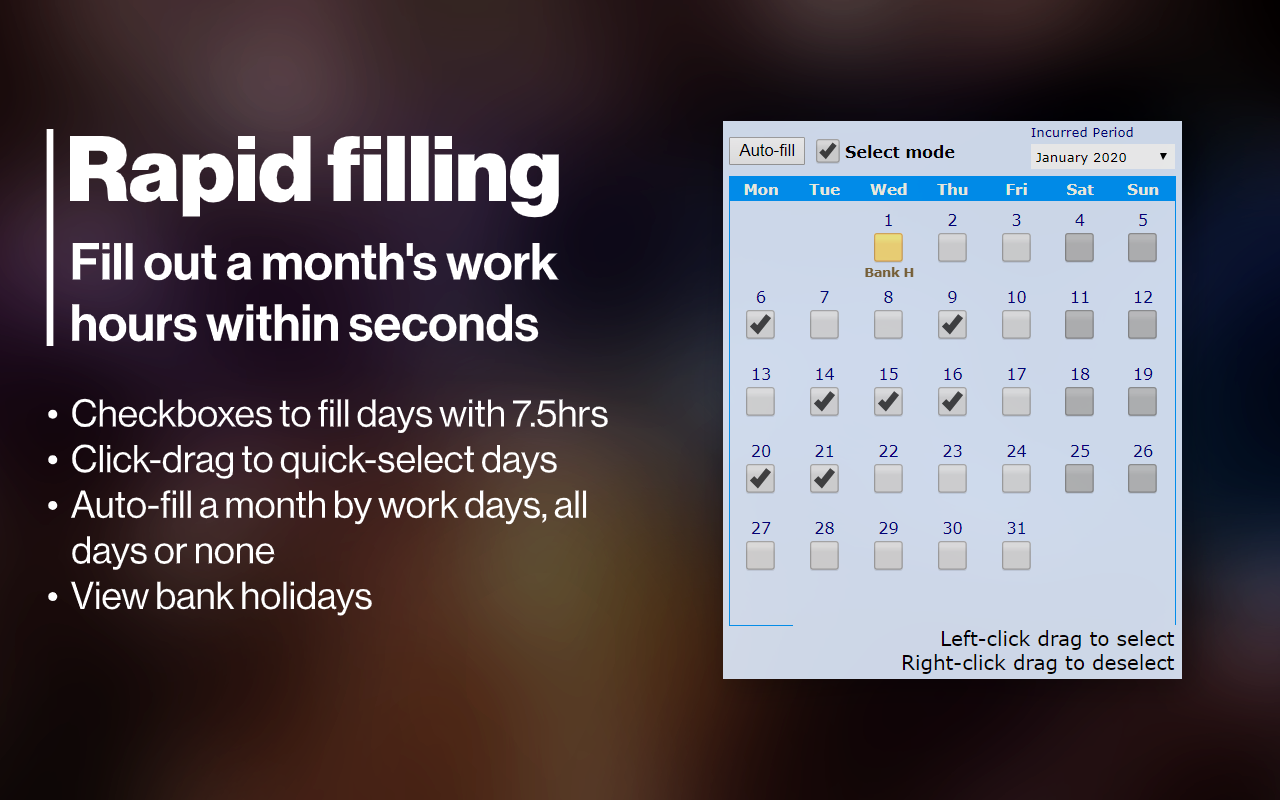
<style>
.page{position:relative;width:1280px;height:800px}
.page>*{position:absolute;margin:0}
.t1{font:91px "NeueHaasDisplay-Black";color:#ffffff}
.t2{font:51px "NeueHaasDisplay-Mediu";color:#ffffff}
.t3{font:38px "NeueHaasDisplay-Roman";color:#ffffff}
</style>
<div class="page">
<p class="t1" style="left:69px;top:134px;width:490px;height:84px">Rapid filling</p>
<p class="t2" style="left:72px;top:243px;width:487px;height:99px">Fill out a month's work<br>hours within seconds</p>
<p class="t3" style="left:48px;top:398px;width:560px;height:218px">•  Checkboxes to fill days with 7.5hrs<br>•  Click-drag to quick-select days<br>•  Auto-fill a month by work days, all<br>    days or none<br>•  View bank holidays</p>
</div>
